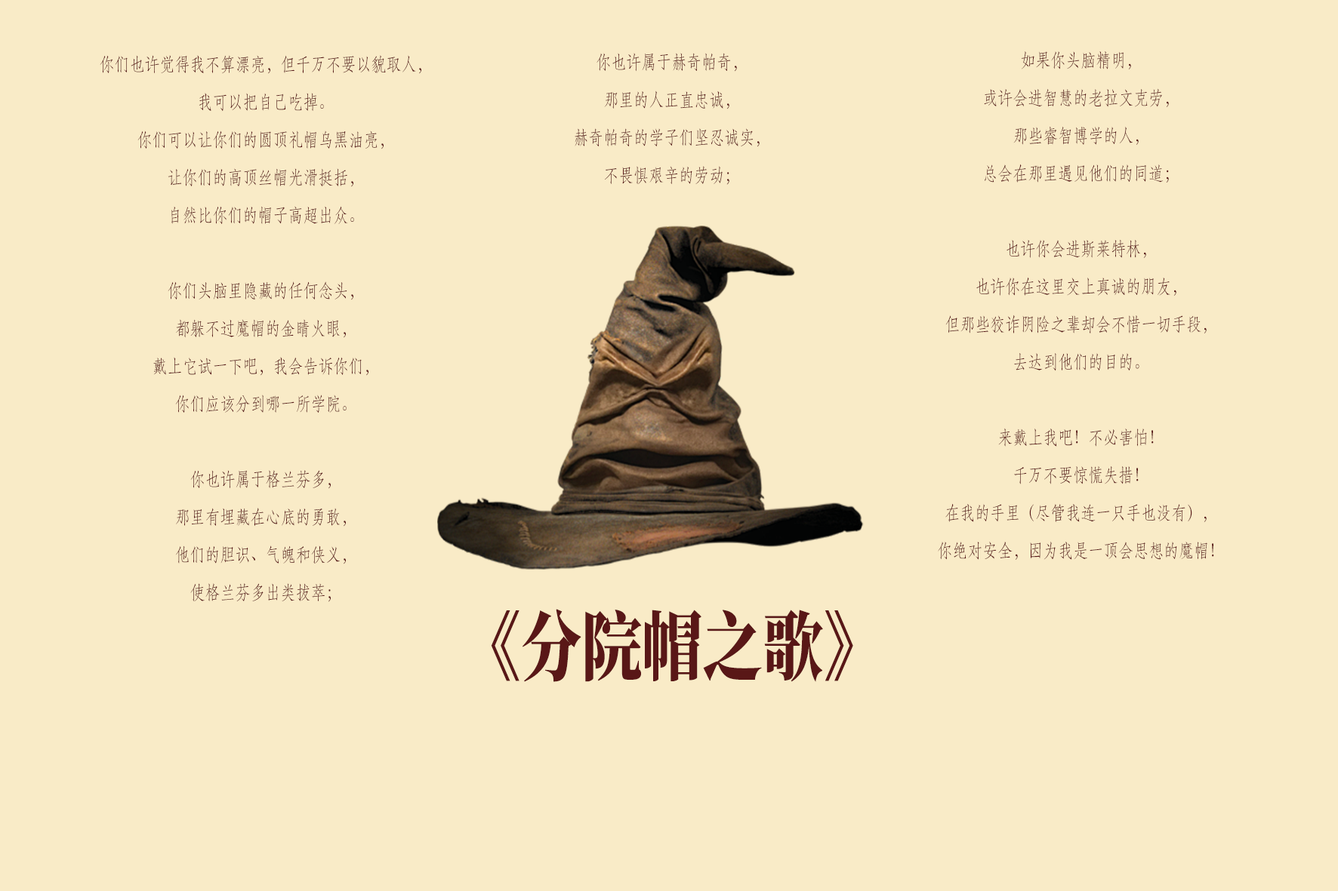
<style>
.page{position:relative;width:1338px;height:891px;background:#f9ebc7}
.page>*{position:absolute;margin:0}
.t1{font:18.9px/37.7px "STFangsong";color:#591717;scale:0.8 1}
.t2{font:75.5px "SourceHanSerifSC-Heavy";color:#591717;scale:0.8 1}
.t3{font:75.5px "AdobeHeitiStd-Regular";color:#591717;scale:0.8 1}
</style>
<div class="page">
<p class="t1" style="left:574px;top:53px;width:185px;height:132px;text-align:center">你也许属于赫奇帕奇，<br>那里的人正直忠诚，<br>赫奇帕奇的学子们坚忍诚实，<br>不畏惧艰辛的劳动；</p>
<p class="t1" style="left:938px;top:51px;width:276px;height:509px;text-align:center">如果你头脑精明，<br>或许会进智慧的老拉文克劳，<br>那些睿智博学的人，<br>总会在那里遇见他们的同道；<br><br>也许你会进斯莱特林，<br>也许你在这里交上真诚的朋友，<br>但那些狡诈阴险之辈却会不惜一切手段，<br>去达到他们的目的。<br><br>来戴上我吧！不必害怕！<br>千万不要惊慌失措！<br>在我的手里（尽管我连一只手也没有），<br>你绝对安全，因为我是一顶会思想的魔帽！</p>
<p class="t1" style="left:100px;top:55px;width:321px;height:547px;text-align:center">你们也许觉得我不算漂亮，但千万不要以貌取人，<br>我可以把自己吃掉。<br>你们可以让你们的圆顶礼帽乌黑油亮，<br>让你们的高顶丝帽光滑挺括，<br>自然比你们的帽子高超出众。<br><br>你们头脑里隐藏的任何念头，<br>都躲不过魔帽的金睛火眼，<br>戴上它试一下吧，我会告诉你们，<br>你们应该分到哪一所学院。<br><br>你也许属于格兰芬多，<br>那里有埋藏在心底的勇敢，<br>他们的胆识、气魄和侠义，<br>使格兰芬多出类拔萃；</p>
<p class="t2" style="left:491px;top:609px;width:362px;height:73px"><span class="t3">《</span>分院帽之歌<span class="t3">》</span></p>
</div>
